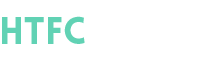
<style>
.page{position:relative;width:200px;height:60px;background:#ffffff}
.page>*{position:absolute;margin:0}
.t1{font:38px "LoveloBlack";color:#61d2b4}
</style>
<div class="page">
<p class="t1" style="left:2px;top:16px;width:83px;height:28px">HTFC</p>
</div>
